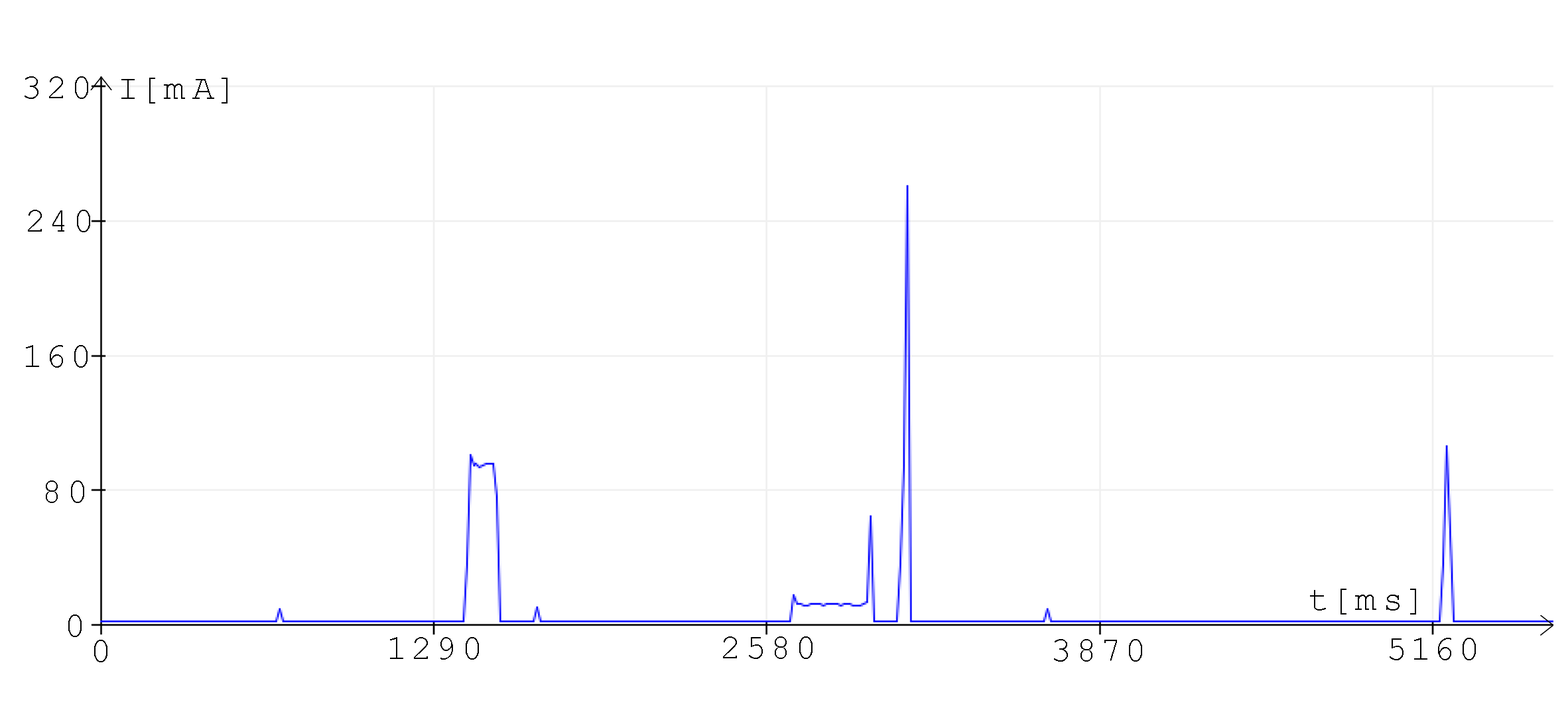
<style>
.page{position:relative;width:1568px;height:726px;background:#ffffff}
.page>*{position:absolute;margin:0}
.t1{font:34.4px "CourierNewPSMT";letter-spacing:0.2em;color:#000000}
</style>
<div class="page">
<p class="t1" style="left:25px;top:76px;width:63px;height:23px">320</p>
<p class="t1" style="left:121px;top:78px;width:107px;height:25px">I[mA]</p>
<p class="t1" style="left:28px;top:210px;width:62px;height:22px">240</p>
<p class="t1" style="left:26px;top:345px;width:62px;height:22px">160</p>
<p class="t1" style="left:46px;top:480px;width:38px;height:23px">80</p>
<p class="t1" style="left:1310px;top:588px;width:106px;height:26px">t[ms]</p>
<p class="t1" style="left:68px;top:614px;width:14px;height:23px">0</p>
<p class="t1" style="left:94px;top:639px;width:13px;height:23px">0</p>
<p class="t1" style="left:390px;top:637px;width:89px;height:22px">1290</p>
<p class="t1" style="left:723px;top:636px;width:90px;height:23px">2580</p>
<p class="t1" style="left:1054px;top:639px;width:88px;height:22px">3870</p>
<p class="t1" style="left:1390px;top:637px;width:86px;height:23px">5160</p>
</div>
